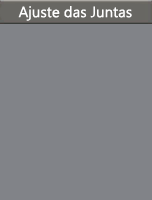
<style>
.page{position:relative;width:152px;height:200px;background:#818388}
.page>*{position:absolute;margin:0}
.t1{font:15px "YuGothicUI-Regular";color:#ffffff}
</style>
<div class="page">
<p class="t1" style="left:18px;top:6px;width:114px;height:15px">Ajuste das Juntas</p>
</div>
